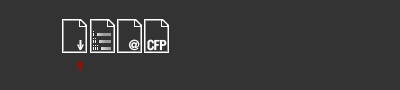
<style>
.page{position:relative;width:400px;height:90px;background:#333333}
.page>*{position:absolute;margin:0}
.t1{font:14px "TradeGothic-Bold";letter-spacing:-0.06em;color:#ffffff}
</style>
<div class="page">
<p class="t1" style="left:128px;top:39px;width:12px;height:12px">@</p>
<p class="t1" style="left:147px;top:39px;width:20px;height:12px">CFP</p>
</div>
